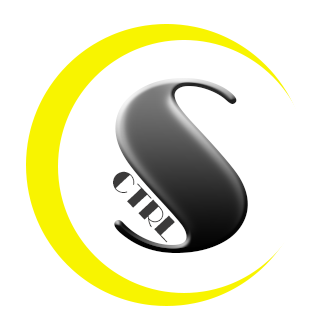
<style>
.page{position:relative;width:336px;height:328px;background:#ffffff}
.page>*{position:absolute;margin:0}
.t1{font:250px "Broadway"}
.t2{font:30px "Broadway";color:#3b3a3a}
</style>
<div class="page">
<p class="t1" style="left:114px;top:77px;width:134px;height:176px">S</p>
<p class="t2" style="left:113px;top:171px;width:62px;height:72px;rotate:47deg">CTRL</p>
</div>
